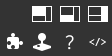
<style>
.page{position:relative;width:112px;height:56px;background:#333333}
.page>*{position:absolute;margin:0}
.t1{font:18px "NanumSquareOTFR";color:#ffffff}
.t2{font:10px "MalgunGothicBold"}
</style>
<div class="page">
<p class="t1" style="left:65px;top:35px;width:9px;height:15px">?</p>
<p class="t2" style="left:89px;top:38px;width:17px;height:8px">&lt;/&gt;</p>
</div>
